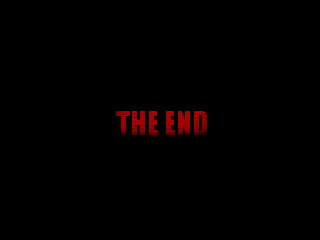
<style>
.page{position:relative;width:320px;height:240px;background:#000000}
.page>*{position:absolute;margin:0}
.t1{font:30px "Impact";color:#9a0000}
</style>
<div class="page">
<p class="t1" style="left:116px;top:111px;width:91px;height:24px">THE END</p>
</div>
